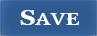
<style>
.page{position:relative;width:97px;height:36px;background:#2f5a90}
.page>*{position:absolute;margin:0}
.t1{font:24px "GodOfWar";color:#ffffff}
</style>
<div class="page">
<p class="t1" style="left:20px;top:10px;width:59px;height:15px">Save</p>
</div>
